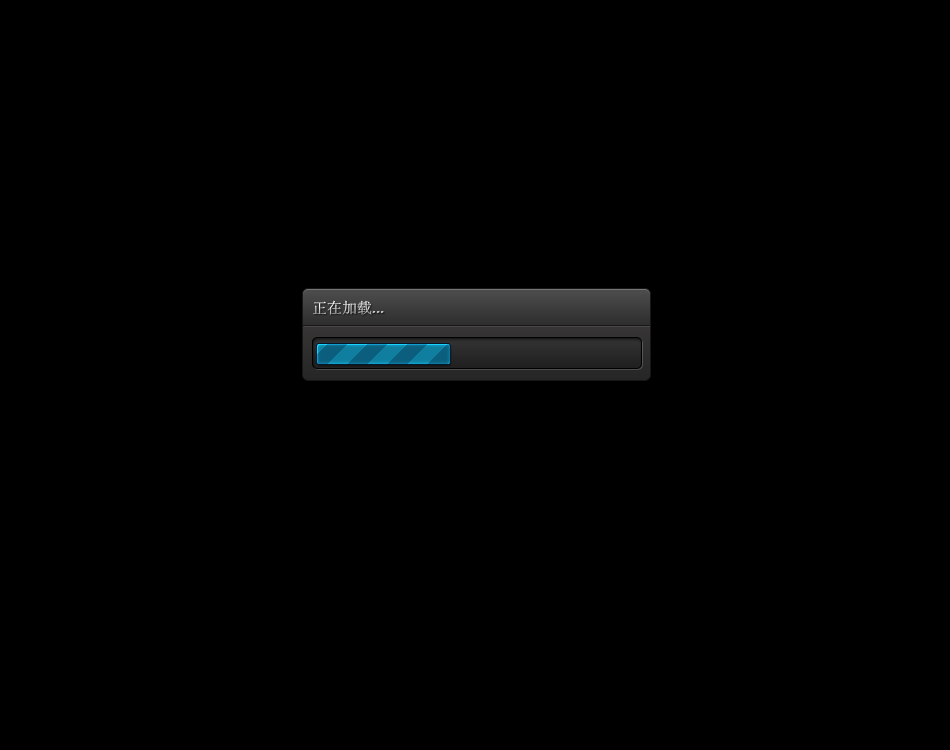
<style>
.page{position:relative;width:950px;height:750px;background:#000000}
.page>*{position:absolute;margin:0}
.t1{font:15px "SimSun";color:#c2c2c2}
.t2{font:15px "Arial-BoldItalicMT";color:#c2c2c2}
</style>
<div class="page">
<p class="t1" style="left:313px;top:300px;width:71px;height:15px">正在加载<span class="t2">...</span></p>
</div>
